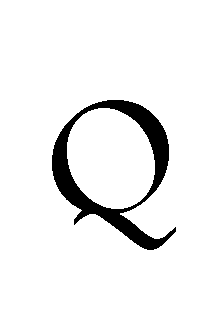
<style>
.page{position:relative;width:222px;height:323px;background:#ffffff}
.page>*{position:absolute;margin:0}
.t1{font:180px "FootlightMTLight";color:#000000}
</style>
<div class="page">
<p class="t1" style="left:52px;top:100px;width:124px;height:150px">Q</p>
</div>
